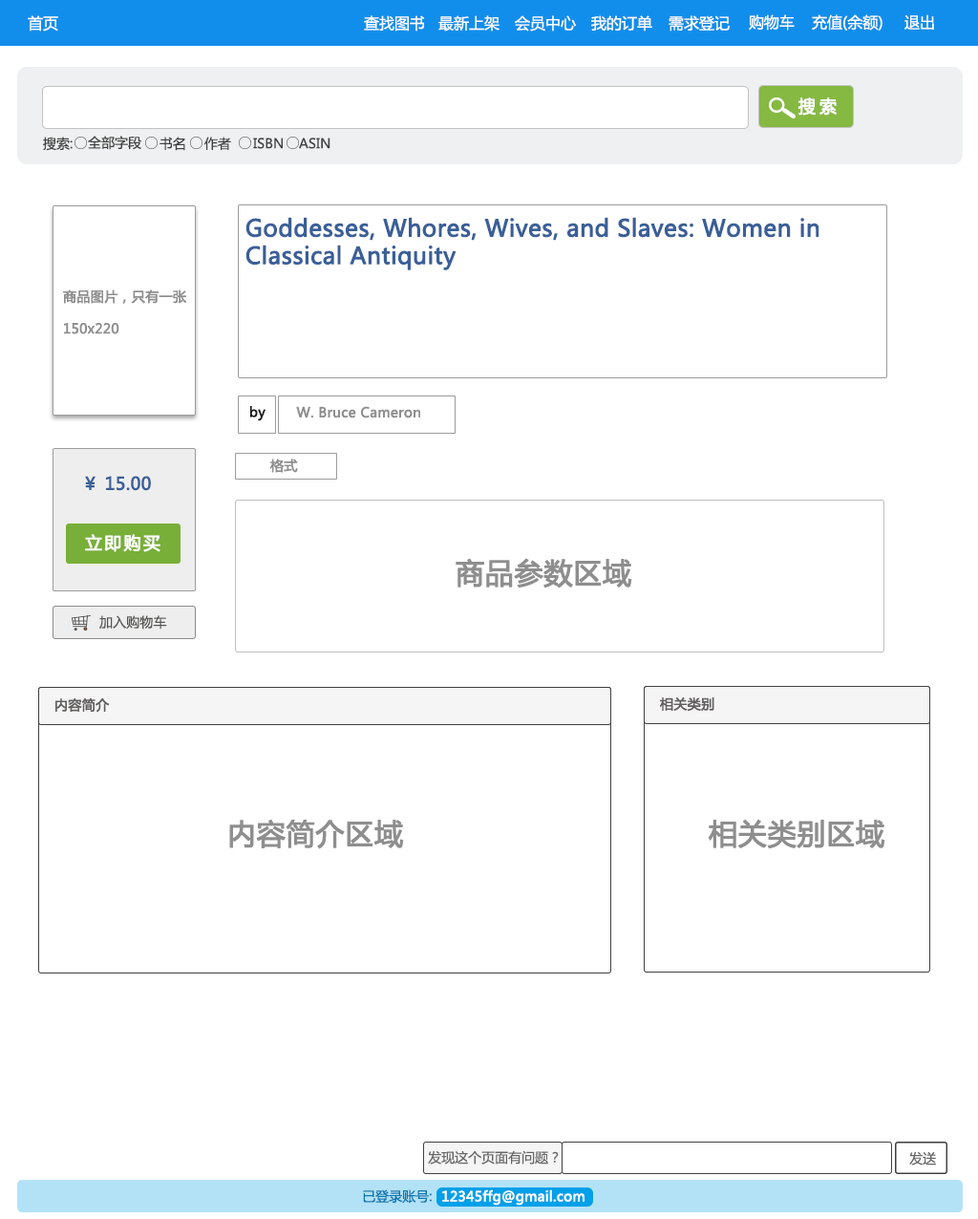
<style>
.page{position:relative;width:978px;height:1219px;background:#ffffff}
.page>*{position:absolute;margin:0}
.t1{font:15.3px "MicrosoftYaHei";color:#ffffff}
.t2{font:17.2px "MicrosoftYaHei";letter-spacing:0.2em;color:#ffffff;font-weight:bold}
.t3{font:13.4px "MicrosoftYaHei";color:#414040}
.t4{font:22.9px "MicrosoftYaHei";color:#3a5f98;font-weight:bold}
.t5{font:13.4px "MicrosoftYaHei";color:#8e8e8e;font-weight:bold}
.t6{font:13.4px "MicrosoftYaHei";color:#161616;font-weight:bold}
.t7{font:17.2px "MicrosoftYaHei";color:#3a5f98;font-weight:bold}
.t8{font:17.2px "MicrosoftYaHei";letter-spacing:0.1em;color:#ffffff;font-weight:bold}
.t9{font:28.7px "MicrosoftYaHei";color:#8e8e8e;font-weight:bold}
.t10{font:13.4px "MicrosoftYaHei";letter-spacing:0.01em;color:#555453}
.t11{font:13.4px "MicrosoftYaHei";color:#615e5e;font-weight:bold}
.t12{font:13.4px "MicrosoftYaHei";color:#666464}
.t13{font:13.4px "MicrosoftYaHei";color:#0875ae}
.t14{font:13.4px "MicrosoftYaHei";color:#ffffff;font-weight:bold}
</style>
<div class="page">
<p class="t1" style="left:28px;top:15px;width:30px;height:17px">首页</p>
<p class="t1" style="left:364px;top:15px;width:61px;height:17px">查找图书</p>
<p class="t1" style="left:438px;top:15px;width:62px;height:17px">最新上架</p>
<p class="t1" style="left:515px;top:15px;width:61px;height:17px">会员中心</p>
<p class="t1" style="left:591px;top:15px;width:61px;height:17px">我的订单</p>
<p class="t1" style="left:669px;top:15px;width:61px;height:17px">需求登记</p>
<p class="t1" style="left:749px;top:14px;width:46px;height:17px">购物车</p>
<p class="t1" style="left:812px;top:14px;width:71px;height:17px">充值(余额)</p>
<p class="t1" style="left:905px;top:14px;width:29px;height:16px">退出</p>
<p class="t2" style="left:798px;top:97px;width:39px;height:19px">搜索</p>
<p class="t3" style="left:43px;top:137px;width:30px;height:14px">搜索:</p>
<p class="t3" style="left:88px;top:136px;width:53px;height:14px">全部字段</p>
<p class="t3" style="left:160px;top:137px;width:25px;height:14px">书名</p>
<p class="t3" style="left:204px;top:137px;width:27px;height:13px">作者</p>
<p class="t3" style="left:253px;top:138px;width:30px;height:11px">ISBN</p>
<p class="t3" style="left:299px;top:138px;width:32px;height:11px">ASIN</p>
<p class="t4" style="left:246px;top:217px;width:574px;height:53px">Goddesses, Whores, Wives, and Slaves: Women in Classical Antiquity</p>
<p class="t5" style="left:63px;top:289px;width:123px;height:45px">商品图片，只有一张<br><br>150x220</p>
<p class="t6" style="left:250px;top:406px;width:16px;height:15px">by</p>
<p class="t5" style="left:296px;top:406px;width:124px;height:12px">W. Bruce Cameron</p>
<p class="t5" style="left:269px;top:459px;width:29px;height:14px">格式</p>
<p class="t7" style="left:85px;top:476px;width:66px;height:15px">￥ 15.00</p>
<p class="t8" style="left:85px;top:534px;width:75px;height:18px">立即购买</p>
<p class="t9" style="left:456px;top:558px;width:176px;height:30px">商品参数区域</p>
<p class="t10" style="left:99px;top:615px;width:68px;height:15px">加入购物车</p>
<p class="t11" style="left:55px;top:697px;width:55px;height:16px">内容简介</p>
<p class="t11" style="left:659px;top:696px;width:56px;height:16px">相关类别</p>
<p class="t9" style="left:229px;top:819px;width:175px;height:30px">内容简介区域</p>
<p class="t9" style="left:708px;top:819px;width:178px;height:30px">相关类别区域</p>
<p class="t12" style="left:428px;top:1150px;width:131px;height:15px">发现这个页面有问题？</p>
<p class="t12" style="left:909px;top:1151px;width:27px;height:14px">发送</p>
<p class="t13" style="left:363px;top:1189px;width:69px;height:15px">已登录账号:</p>
<p class="t14" style="left:442px;top:1189px;width:143px;height:17px">12345ffg@gmail.com</p>
</div>
